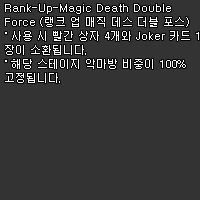
<style>
.page{position:relative;width:200px;height:200px;background:#333333}
.page>*{position:absolute;margin:0}
.t1{font:11px/14px "Dotum";color:#ffffff}
</style>
<div class="page">
<p class="t1" style="left:5px;top:4px;width:194px;height:79px">Rank-Up-Magic Death Double <br>Force (랭크 업 매직 데스 더블 포스)<br>˚ 사용 시 빨간 상자 4개와 Joker 카드 1<br>장이 소환됩니다.<br>˚ 해당 스테이지 악마방 비중이 100%<br>고정됩니다.</p>
</div>
